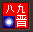
<style>
.page{position:relative;width:33px;height:32px;background:#f20000}
.page>*{position:absolute;margin:0}
.t1{font:10.4px "SimSun";color:#ffffff}
.t2{font:11.7px "SimSun";color:#ffffff}
</style>
<div class="page">
<p class="t1" style="left:6px;top:4px;width:19px;height:9px">八九</p>
<p class="t2" style="left:16px;top:15px;width:11px;height:12px">晋</p>
</div>
